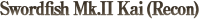
<style>
.page{position:relative;width:213px;height:19px;background:#ffffff}
.page>*{position:absolute;margin:0}
.t1{font:18px "RyuminPro-ExBold";letter-spacing:-0.08em;color:#4a3f32;font-weight:bold;scale:0.9 1}
</style>
<div class="page">
<p class="t1" style="left:0px;top:1px;width:199px;height:18px">Swordfish Mk.II Kai (Recon)</p>
</div>
